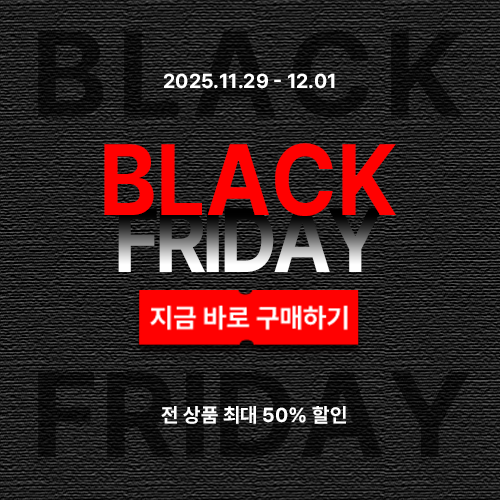
<style>
.page{position:relative;width:500px;height:500px}
.page>*{position:absolute;margin:0}
.t1{font:20px "Pretendard-Bold";color:#ffffff}
.t2{font:100px "Pretendard-Bold";letter-spacing:0.005em;color:#ff0101;scale:0.9 1}
.t3{font:90px "Pretendard-Bold";letter-spacing:-0.05em;scale:0.9 1}
.t4{font:20px "Pretendard-Bold";letter-spacing:0.005em;color:#ffffff}
</style>
<div class="page">
<p class="t1" style="left:164px;top:73px;width:171px;height:16px">2025.11.29 - 12.01</p>
<p class="t2" style="left:104px;top:143px;width:292px;height:73px">BLACK</p>
<p class="t3" style="left:118px;top:208px;width:265px;height:64px">FRIDAY</p>
<p class="t4" style="left:161px;top:406px;width:185px;height:18px">전 상품 최대 50% 할인</p>
</div>
